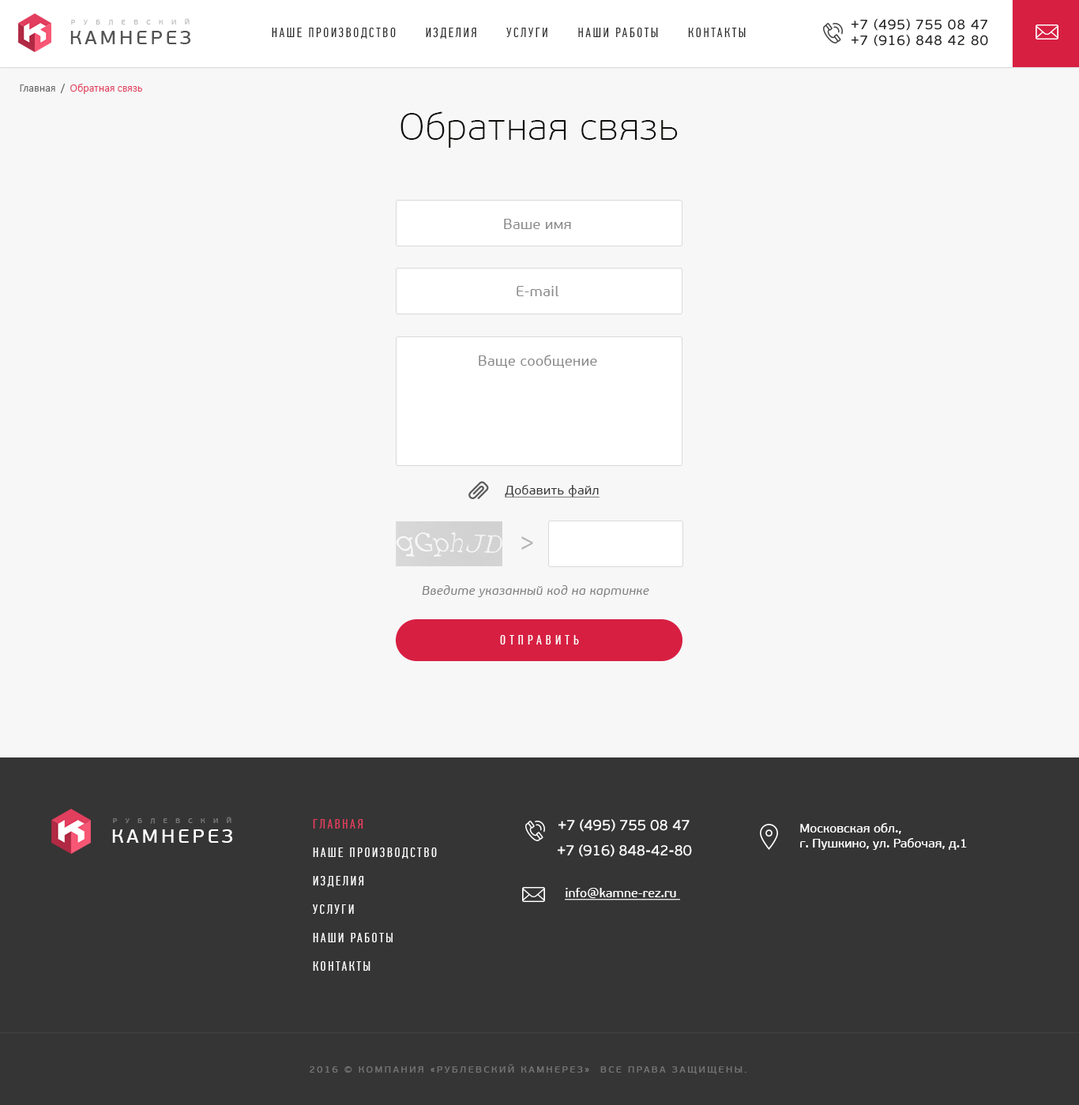
<style>
.page{position:relative;width:1079px;height:1105px;background:#f7f7f7}
.page>*{position:absolute;margin:0}
.t1{font:7px "PFBeauSansPro-Regular";letter-spacing:0.415em;color:#bcbcbc;text-transform:uppercase;scale:1.05 1}
.t2{font:13.4px "PFDinTextCompPro-Regular";letter-spacing:0.15em;color:#282828;text-transform:uppercase}
.t3{font:14.2px/15.8px "PFBeauSansPro-Bbook";letter-spacing:0.05em;color:#222222}
.t4{font:18.8px "PFBeauSansPro-Bbook";letter-spacing:0.15em;color:#535353;scale:1.05 1}
.t5{font:11.1px "Calibri";color:#e23f5e}
.t6{font:11.1px "Calibri";color:#666666}
.t7{font:37.9px "PFBeauSansPro-Thin";letter-spacing:0.025em;color:#0e0f0d}
.t8{font:14.2px "PFBeauSansPro-Regular";letter-spacing:0.025em;color:#898989}
.t9{font:12.6px "PFBeauSansPro-Regular";letter-spacing:0.025em;color:#353535;text-decoration:underline}
.t10{font:30.6px "PFDinTextCompPro-Regular";letter-spacing:0.3em;color:#b4b4b4;text-transform:uppercase}
.t11{font:12.6px "PFBeauSansPro-Italic";letter-spacing:0.025em;color:#7c7c7c}
.t12{font:13.4px "PFDinTextCompPro-Regular";letter-spacing:0.3em;color:#ffffff;text-transform:uppercase}
</style>
<div class="page">
<p class="t1" style="left:71px;top:18px;width:119px;height:7px">Р у б л е в с к и й</p>
<p class="t2" style="left:272px;top:28px;width:474px;height:11px">наше Производство      изделия      услуги      наши работы      контакты</p>
<p class="t3" style="left:852px;top:18px;width:136px;height:29px">+7 (495) 755 08 47<br>+7 (916) 848 42 80</p>
<p class="t4" style="left:70px;top:31px;width:121px;height:13px">КАМНЕРЕЗ</p>
<p class="t5" style="left:20px;top:84px;width:122px;height:10px"><span class="t6">Главная  /  </span>Обратная связь</p>
<p class="t7" style="left:400px;top:111px;width:278px;height:37px">Обратная связь</p>
<p class="t8" style="left:504px;top:219px;width:67px;height:10px">Ваше имя</p>
<p class="t8" style="left:517px;top:286px;width:42px;height:10px">E-mail</p>
<p class="t8" style="left:479px;top:355px;width:118px;height:13px">Ваще сообщение</p>
<p class="t9" style="left:505px;top:485px;width:95px;height:13px">Добавить файл</p>
<p class="t10" style="left:521px;top:536px;width:12px;height:14px">&gt;</p>
<p class="t11" style="left:422px;top:585px;width:227px;height:12px">Введите указанный код на картинке</p>
<p class="t12" style="left:500px;top:635px;width:79px;height:10px">отправить</p>
</div>
